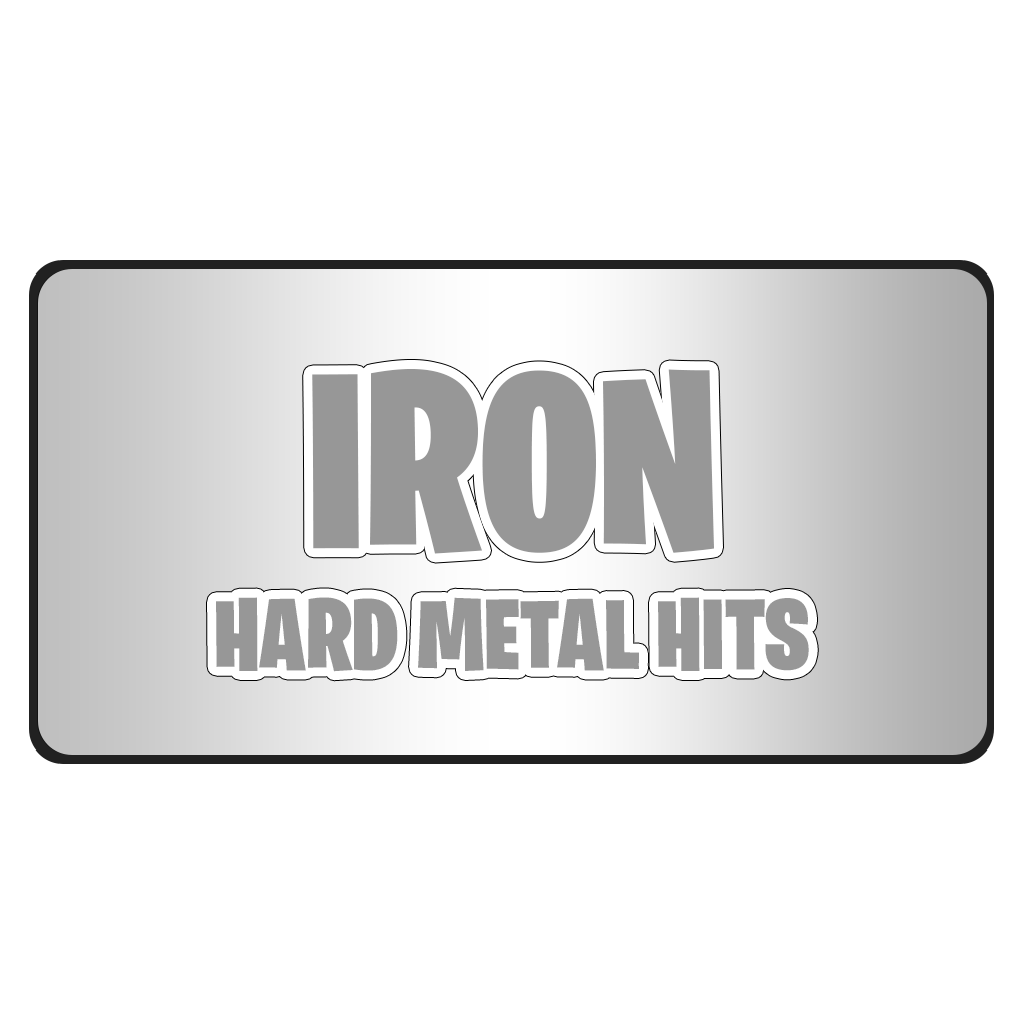
<style>
.page{position:relative;width:1024px;height:1024px;background:#ffffff}
.page>*{position:absolute;margin:0}
.t1{font:250px "BurbankBigCondensed-Black";color:#979797}
.t2{font:100px "BurbankBigCondensed-Black";color:#979797}
</style>
<div class="page">
<p class="t1" style="left:312px;top:369px;width:402px;height:185px">IRON</p>
<p class="t2" style="left:216px;top:597px;width:593px;height:75px">HARD METAL HITS</p>
</div>
